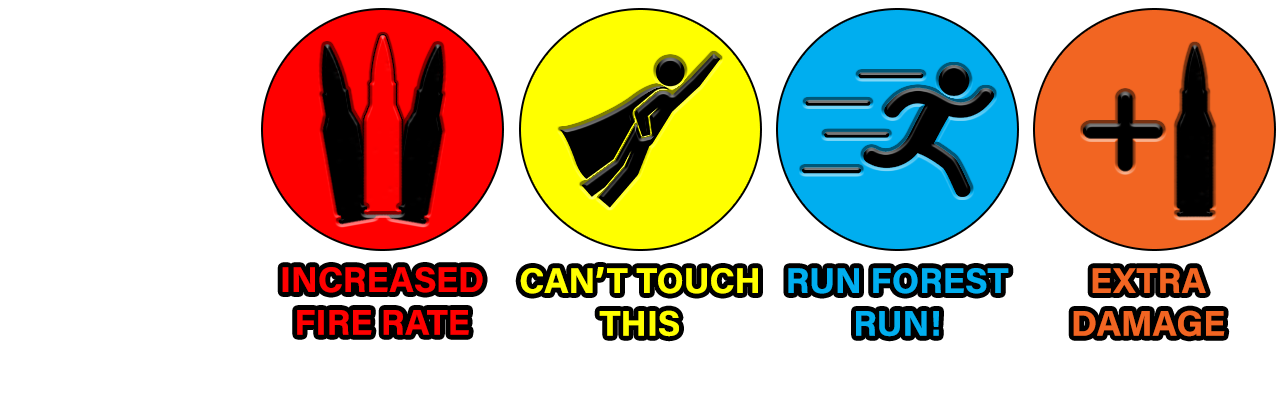
<style>
.page{position:relative;width:1280px;height:400px;background:#ffffff}
.page>*{position:absolute;margin:0}
.t1{font:35.6px "AcuminConcept-Bold";color:#ff0000;text-transform:uppercase}
.t2{font:35.6px "AcuminConcept-Bold";color:#ffff00;text-transform:uppercase}
.t3{font:35.6px "AcuminConcept-Bold";color:#00aeef;text-transform:uppercase}
.t4{font:35.6px "AcuminConcept-Bold";color:#f26522;text-transform:uppercase}
</style>
<div class="page">
<p class="t1" style="left:282px;top:267px;width:201px;height:68px;text-align:center">Increased<br>fire rate</p>
<p class="t2" style="left:520px;top:267px;width:238px;height:70px;text-align:center">Can’t touch<br>this</p>
<p class="t3" style="left:788px;top:268px;width:221px;height:69px;text-align:center">Run Forest<br>run!</p>
<p class="t4" style="left:1073px;top:268px;width:152px;height:69px;text-align:center">Extra<br>Damage</p>
</div>
